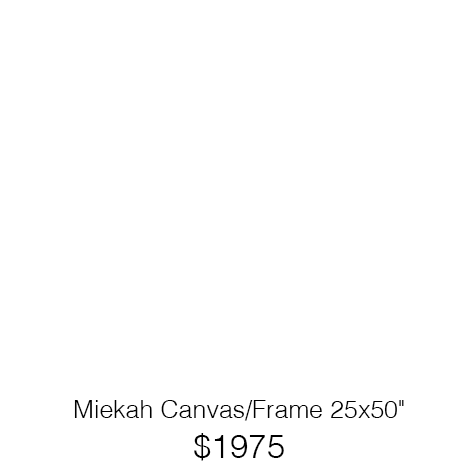
<style>
.page{position:relative;width:466px;height:466px;background:#ffffff}
.page>*{position:absolute;margin:0}
.t1{font:25px "Helvetica-Light";color:#000000}
.t2{font:33.3px "Helvetica-Light";color:#000000}
</style>
<div class="page">
<p class="t1" style="left:74px;top:400px;width:330px;height:61px;text-align:center">Miekah Canvas/Frame 25x50"<br><span class="t2">$1975</span></p>
</div>
